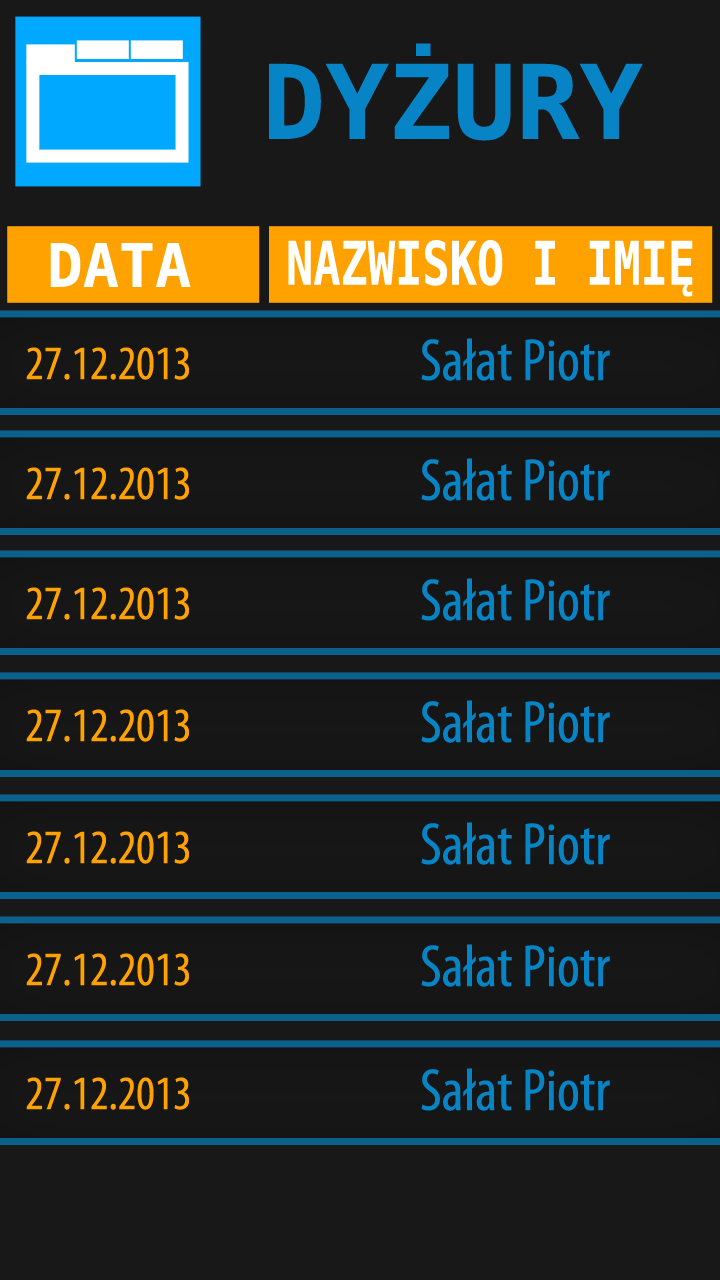
<style>
.page{position:relative;width:720px;height:1280px;background:#181818}
.page>*{position:absolute;margin:0}
.t1{font:102.7px "DejaVuSansMono-Bold";color:#0684c6}
.t2{font:60px "DejaVuSansMono-Bold";color:#ffffff}
.t3{font:60px "DejaVuSansMono-Bold";color:#ffffff;scale:0.76 1}
.t4{font:60px "MyriadPro-Cond";color:#0684c6}
.t5{font:48px "MyriadPro-Cond";color:#ffa200}
</style>
<div class="page">
<p class="t1" style="left:269px;top:43px;width:374px;height:98px">DYŻURY</p>
<p class="t2" style="left:50px;top:243px;width:141px;height:44px">DATA</p>
<p class="t3" style="left:288px;top:240px;width:405px;height:57px">NAZWISKO I IMIĘ</p>
<p class="t4" style="left:421px;top:338px;width:189px;height:43px">Sałat Piotr</p>
<p class="t5" style="left:26px;top:347px;width:163px;height:33px">27.12.2013</p>
<p class="t4" style="left:421px;top:458px;width:189px;height:43px">Sałat Piotr</p>
<p class="t5" style="left:26px;top:467px;width:163px;height:33px">27.12.2013</p>
<p class="t4" style="left:421px;top:578px;width:189px;height:43px">Sałat Piotr</p>
<p class="t5" style="left:26px;top:587px;width:163px;height:33px">27.12.2013</p>
<p class="t4" style="left:421px;top:700px;width:189px;height:43px">Sałat Piotr</p>
<p class="t5" style="left:26px;top:709px;width:163px;height:33px">27.12.2013</p>
<p class="t4" style="left:421px;top:822px;width:189px;height:43px">Sałat Piotr</p>
<p class="t5" style="left:26px;top:831px;width:163px;height:33px">27.12.2013</p>
<p class="t5" style="left:26px;top:953px;width:163px;height:33px">27.12.2013</p>
<p class="t4" style="left:421px;top:944px;width:189px;height:43px">Sałat Piotr</p>
<p class="t4" style="left:421px;top:1068px;width:189px;height:43px">Sałat Piotr</p>
<p class="t5" style="left:26px;top:1077px;width:163px;height:33px">27.12.2013</p>
</div>
